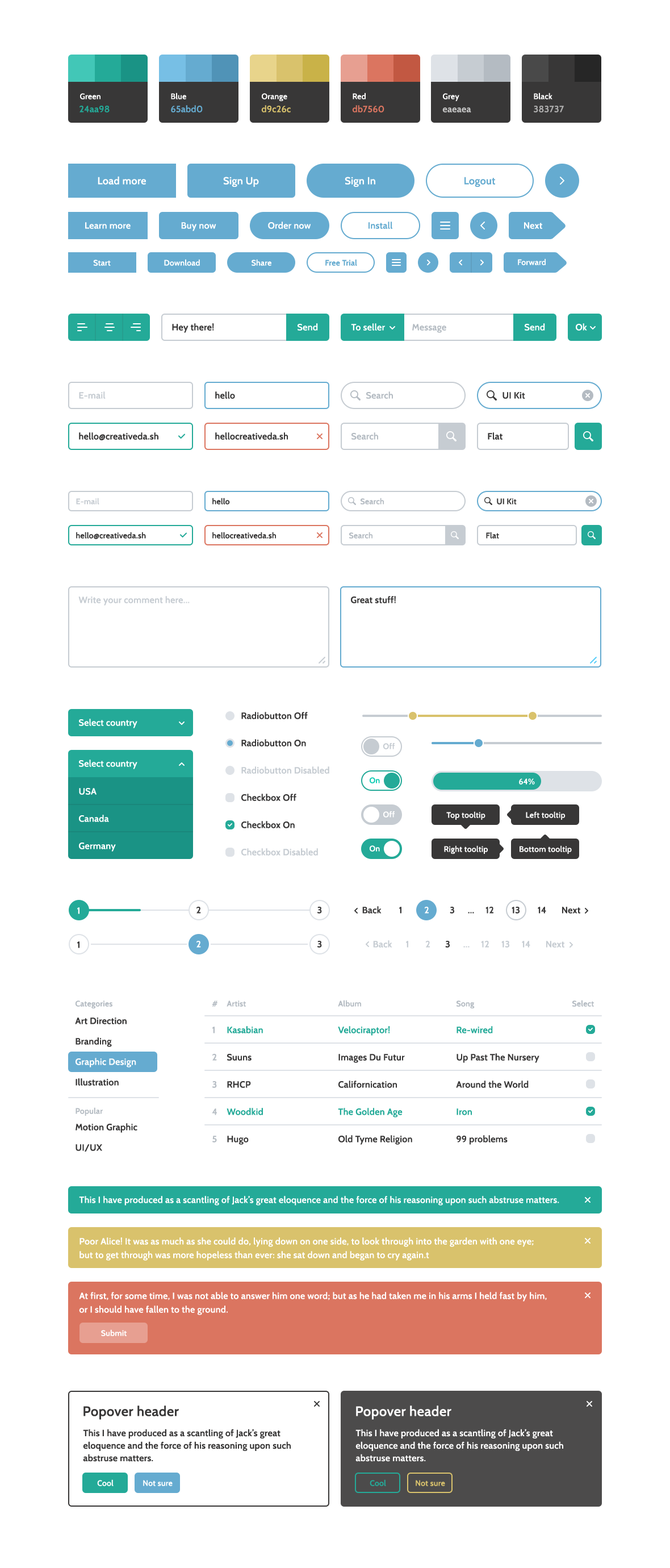
<style>
.page{position:relative;width:670px;height:1568px;background:#ffffff}
.page>*{position:absolute;margin:0}
.t1{font:8px "Cabin-SemiBold";letter-spacing:0.02em;color:#ffffff}
.t2{font:9.1px "Cabin-SemiBold";letter-spacing:0.02em;color:#24aa98}
.t3{font:9.1px "Cabin-SemiBold";letter-spacing:0.02em;color:#65abd0}
.t4{font:9.1px "Cabin-SemiBold";letter-spacing:0.02em;color:#d9c26c}
.t5{font:9.1px "Cabin-SemiBold";letter-spacing:0.02em;color:#db7560}
.t6{font:9.1px "Cabin-SemiBold";letter-spacing:0.02em;color:#c6c6c6}
.t7{font:9.1px "Cabin-SemiBold";letter-spacing:0.02em;color:#afafaf}
.t8{font:10.2px "Cabin-SemiBold";letter-spacing:0.02em;color:#ffffff}
.t9{font:10.2px "Cabin-SemiBold";letter-spacing:0.02em;color:#65abd0}
.t10{font:9.1px "Cabin-SemiBold";letter-spacing:0.02em;color:#ffffff}
.t11{font:8px "Cabin-SemiBold";letter-spacing:0.02em;color:#65abd0}
.t12{font:9.1px "Cabin-SemiBold";letter-spacing:0.02em;color:#383737}
.t13{font:9.1px "Cabin-SemiBold";letter-spacing:0.02em;color:#b4bbc2}
.t14{font:9.1px "Cabin-SemiBold";letter-spacing:0.02em;color:#c6ccd2}
.t15{font:8px "Cabin-SemiBold";letter-spacing:0.02em;color:#c6ccd2}
.t16{font:8px "Cabin-SemiBold";letter-spacing:0.02em;color:#383737}
.t17{font:8px "Cabin-SemiBold";letter-spacing:0.02em;color:#b4bbc2}
.t18{font:8px "Cabin-SemiBold";letter-spacing:0.02em;color:#13cdb5}
.t19{font:9.1px/27.3px "Cabin-SemiBold";letter-spacing:0.02em;color:#ffffff}
.t20{font:9.1px/20.5px "Cabin-SemiBold";letter-spacing:0.02em;color:#383737}
.t21{font:9.1px/20.5px "Cabin-SemiBold";letter-spacing:0.02em;color:#ffffff}
.t22{font:9.1px/27.3px "Cabin-SemiBold";letter-spacing:0.02em;color:#b4bbc2}
.t23{font:9.1px/27.3px "Cabin-SemiBold";letter-spacing:0.02em;color:#383737}
.t24{font:9.1px/27.3px "Cabin-SemiBold";letter-spacing:0.02em;color:#24aa98}
.t25{font:9.1px/13.6px "Cabin-SemiBold";letter-spacing:0.02em;color:#ffffff}
.t26{font:13.6px "Cabin-SemiBold";letter-spacing:0.02em;color:#383737}
.t27{font:13.6px "Cabin-SemiBold";letter-spacing:0.02em;color:#ffffff}
.t28{font:9.1px/12.5px "Cabin-SemiBold";letter-spacing:0.02em;color:#383737}
.t29{font:9.1px/12.5px "Cabin-SemiBold";letter-spacing:0.02em;color:#ffffff}
.t30{font:8px "Cabin-SemiBold";letter-spacing:0.02em;color:#24aa98}
.t31{font:8px "Cabin-SemiBold";letter-spacing:0.02em;color:#d9c26c}
</style>
<div class="page">
<p class="t1" style="left:80px;top:93px;width:21px;height:6px">Green</p>
<p class="t1" style="left:171px;top:93px;width:15px;height:6px">Blue</p>
<p class="t1" style="left:262px;top:93px;width:25px;height:8px">Orange</p>
<p class="t1" style="left:353px;top:93px;width:13px;height:6px">Red</p>
<p class="t1" style="left:443px;top:93px;width:17px;height:8px">Grey</p>
<p class="t1" style="left:534px;top:93px;width:19px;height:6px">Black</p>
<p class="t2" style="left:80px;top:106px;width:30px;height:6px">24aa98</p>
<p class="t3" style="left:171px;top:105px;width:32px;height:7px">65abd0</p>
<p class="t4" style="left:261px;top:105px;width:30px;height:7px">d9c26c</p>
<p class="t5" style="left:352px;top:105px;width:33px;height:7px">db7560</p>
<p class="t6" style="left:443px;top:107px;width:29px;height:5px">eaeaea</p>
<p class="t7" style="left:534px;top:106px;width:30px;height:6px">383737</p>
<p class="t8" style="left:98px;top:176px;width:48px;height:9px">Load more</p>
<p class="t8" style="left:223px;top:177px;width:36px;height:10px">Sign Up</p>
<p class="t8" style="left:345px;top:177px;width:31px;height:10px">Sign In</p>
<p class="t9" style="left:465px;top:177px;width:30px;height:10px">Logout</p>
<p class="t10" style="left:268px;top:222px;width:43px;height:7px">Order now</p>
<p class="t3" style="left:369px;top:222px;width:24px;height:7px">Install</p>
<p class="t10" style="left:85px;top:222px;width:46px;height:7px">Learn more</p>
<p class="t10" style="left:181px;top:222px;width:35px;height:9px">Buy now</p>
<p class="t10" style="left:524px;top:222px;width:19px;height:7px">Next</p>
<p class="t1" style="left:93px;top:260px;width:18px;height:6px">Start</p>
<p class="t1" style="left:164px;top:259px;width:36px;height:7px">Download</p>
<p class="t1" style="left:252px;top:259px;width:20px;height:7px">Share</p>
<p class="t11" style="left:326px;top:259px;width:31px;height:7px">Free Trial</p>
<p class="t1" style="left:518px;top:258px;width:28px;height:7px">Forward</p>
<p class="t12" style="left:172px;top:323px;width:42px;height:10px">Hey there!</p>
<p class="t10" style="left:298px;top:323px;width:20px;height:8px">Send</p>
<p class="t10" style="left:351px;top:323px;width:34px;height:8px">To seller</p>
<p class="t13" style="left:412px;top:324px;width:35px;height:9px">Message</p>
<p class="t10" style="left:525px;top:323px;width:20px;height:8px">Send</p>
<p class="t10" style="left:576px;top:323px;width:11px;height:8px">Ok</p>
<p class="t14" style="left:79px;top:391px;width:27px;height:8px">E-mail</p>
<p class="t12" style="left:215px;top:391px;width:20px;height:8px">hello</p>
<p class="t13" style="left:366px;top:391px;width:27px;height:8px">Search</p>
<p class="t12" style="left:503px;top:392px;width:23px;height:7px">UI Kit</p>
<p class="t12" style="left:79px;top:432px;width:80px;height:8px">hello@creativeda.sh</p>
<p class="t12" style="left:215px;top:432px;width:73px;height:8px">hellocreativeda.sh</p>
<p class="t13" style="left:352px;top:432px;width:26px;height:8px">Search</p>
<p class="t12" style="left:488px;top:432px;width:15px;height:8px">Flat</p>
<p class="t15" style="left:76px;top:498px;width:23px;height:6px">E-mail</p>
<p class="t16" style="left:212px;top:498px;width:18px;height:6px">hello</p>
<p class="t17" style="left:361px;top:498px;width:23px;height:6px">Search</p>
<p class="t16" style="left:497px;top:498px;width:20px;height:6px">UI Kit</p>
<p class="t16" style="left:76px;top:532px;width:70px;height:7px">hello@creativeda.sh</p>
<p class="t16" style="left:212px;top:532px;width:64px;height:7px">hellocreativeda.sh</p>
<p class="t17" style="left:349px;top:532px;width:24px;height:7px">Search</p>
<p class="t16" style="left:486px;top:532px;width:13px;height:7px">Flat</p>
<p class="t14" style="left:78px;top:596px;width:112px;height:10px">Write your comment here...</p>
<p class="t12" style="left:351px;top:596px;width:45px;height:7px">Great stuff!</p>
<p class="t12" style="left:241px;top:712px;width:67px;height:7px">Radiobutton Off</p>
<p class="t10" style="left:79px;top:719px;width:58px;height:9px">Select country</p>
<p class="t12" style="left:241px;top:739px;width:65px;height:8px">Radiobutton On</p>
<p class="t15" style="left:383px;top:743px;width:12px;height:6px">Off</p>
<p class="t10" style="left:79px;top:760px;width:58px;height:9px">Select country</p>
<p class="t14" style="left:241px;top:766px;width:89px;height:8px">Radiobutton Disabled</p>
<p class="t18" style="left:370px;top:777px;width:10px;height:6px">On</p>
<p class="t1" style="left:519px;top:778px;width:16px;height:7px">64%</p>
<p class="t19" style="left:79px;top:788px;width:37px;height:64px">USA<br>Canada<br>Germany</p>
<p class="t12" style="left:241px;top:794px;width:56px;height:7px">Checkbox Off</p>
<p class="t12" style="left:241px;top:821px;width:54px;height:7px">Checkbox On</p>
<p class="t1" style="left:383px;top:811px;width:12px;height:7px">Off</p>
<p class="t1" style="left:447px;top:811px;width:39px;height:9px">Top tooltip</p>
<p class="t1" style="left:526px;top:811px;width:40px;height:9px">Left tooltip</p>
<p class="t1" style="left:370px;top:845px;width:10px;height:7px">On</p>
<p class="t1" style="left:444px;top:845px;width:44px;height:9px">Right tooltip</p>
<p class="t1" style="left:520px;top:845px;width:52px;height:9px">Bottom tooltip</p>
<p class="t14" style="left:241px;top:848px;width:77px;height:8px">Checkbox Disabled</p>
<p class="t10" style="left:77px;top:907px;width:3px;height:7px">1</p>
<p class="t12" style="left:197px;top:907px;width:4px;height:7px">2</p>
<p class="t12" style="left:318px;top:907px;width:4px;height:7px">3</p>
<p class="t12" style="left:362px;top:906px;width:20px;height:8px">Back</p>
<p class="t12" style="left:399px;top:907px;width:3px;height:7px">1</p>
<p class="t10" style="left:425px;top:907px;width:4px;height:7px">2</p>
<p class="t12" style="left:450px;top:907px;width:4px;height:7px">3</p>
<p class="t12" style="left:468px;top:912px;width:6px;height:2px">...</p>
<p class="t12" style="left:486px;top:907px;width:8px;height:7px">12</p>
<p class="t12" style="left:512px;top:907px;width:8px;height:7px">13</p>
<p class="t12" style="left:538px;top:907px;width:9px;height:7px">14</p>
<p class="t12" style="left:562px;top:907px;width:19px;height:7px">Next</p>
<p class="t12" style="left:77px;top:941px;width:3px;height:7px">1</p>
<p class="t10" style="left:197px;top:941px;width:4px;height:7px">2</p>
<p class="t12" style="left:318px;top:941px;width:4px;height:7px">3</p>
<p class="t14" style="left:373px;top:940px;width:20px;height:8px">Back</p>
<p class="t14" style="left:406px;top:941px;width:2px;height:7px">1</p>
<p class="t14" style="left:426px;top:941px;width:4px;height:7px">2</p>
<p class="t12" style="left:445px;top:941px;width:5px;height:7px">3</p>
<p class="t14" style="left:481px;top:941px;width:8px;height:7px">12</p>
<p class="t14" style="left:502px;top:941px;width:8px;height:7px">13</p>
<p class="t14" style="left:522px;top:941px;width:9px;height:7px">14</p>
<p class="t14" style="left:547px;top:941px;width:18px;height:7px">Next</p>
<p class="t14" style="left:464px;top:946px;width:6px;height:2px">...</p>
<p class="t17" style="left:76px;top:1000px;width:36px;height:8px">Categories</p>
<p class="t17" style="left:212px;top:1000px;width:6px;height:7px">#</p>
<p class="t17" style="left:227px;top:1000px;width:19px;height:7px">Artist</p>
<p class="t17" style="left:338px;top:1000px;width:23px;height:7px">Album</p>
<p class="t17" style="left:457px;top:1000px;width:18px;height:8px">Song</p>
<p class="t17" style="left:573px;top:1000px;width:21px;height:7px">Select</p>
<p class="t20" style="left:75px;top:1017px;width:61px;height:69px">Art Direction<br>Branding<br><span class="t21">Graphic Design<br></span>Illustration</p>
<p class="t22" style="left:212px;top:1027px;width:5px;height:115px">1<br>2<br>3<br>4<br>5</p>
<p class="t23" style="left:227px;top:1026px;width:36px;height:119px"><span class="t24">Kasabian<br></span>Suuns<br>RHCP<br><span class="t24">Woodkid<br></span>Hugo</p>
<p class="t23" style="left:338px;top:1026px;width:74px;height:119px"><span class="t24">Velociraptor!<br></span>Images Du Futur<br>Californication<br><span class="t24">The Golden Age<br></span>Old Tyme Religion</p>
<p class="t23" style="left:456px;top:1026px;width:84px;height:119px"><span class="t24">Re-wired<br></span>Up Past The Nursery<br>Around the World<br><span class="t24">Iron<br></span>99 problems</p>
<p class="t17" style="left:76px;top:1107px;width:27px;height:9px">Popular</p>
<p class="t20" style="left:76px;top:1123px;width:61px;height:29px">Motion Graphic<br>UI/UX</p>
<p class="t10" style="left:79px;top:1196px;width:481px;height:10px">This I have produced as a scantling of Jack’s great eloquence and the force of his reasoning upon such abstruse matters.</p>
<p class="t25" style="left:80px;top:1237px;width:454px;height:24px">Poor Alice! It was as much as she could do, lying down on one side, to look through into the garden with one eye; <br>but to get through was more hopeless than ever: she sat down and began to cry again.t</p>
<p class="t25" style="left:79px;top:1292px;width:468px;height:23px">At first, for some time, I was not able to answer him one word; but as he had taken me in his arms I held fast by him, <br>or I should have fallen to the ground.</p>
<p class="t1" style="left:101px;top:1329px;width:26px;height:7px">Submit</p>
<p class="t26" style="left:84px;top:1406px;width:95px;height:14px">Popover header</p>
<p class="t27" style="left:356px;top:1406px;width:96px;height:14px">Popover header</p>
<p class="t28" style="left:83px;top:1429px;width:208px;height:33px">This I have produced as a scantling of Jack’s great eloquence and the force of his reasoning upon such abstruse matters.</p>
<p class="t29" style="left:356px;top:1429px;width:208px;height:33px">This I have produced as a scantling of Jack’s great eloquence and the force of his reasoning upon such abstruse matters.</p>
<p class="t1" style="left:97px;top:1479px;width:17px;height:7px">Cool</p>
<p class="t1" style="left:143px;top:1480px;width:30px;height:6px">Not sure</p>
<p class="t30" style="left:370px;top:1479px;width:16px;height:7px">Cool</p>
<p class="t31" style="left:416px;top:1480px;width:29px;height:6px">Not sure</p>
</div>
